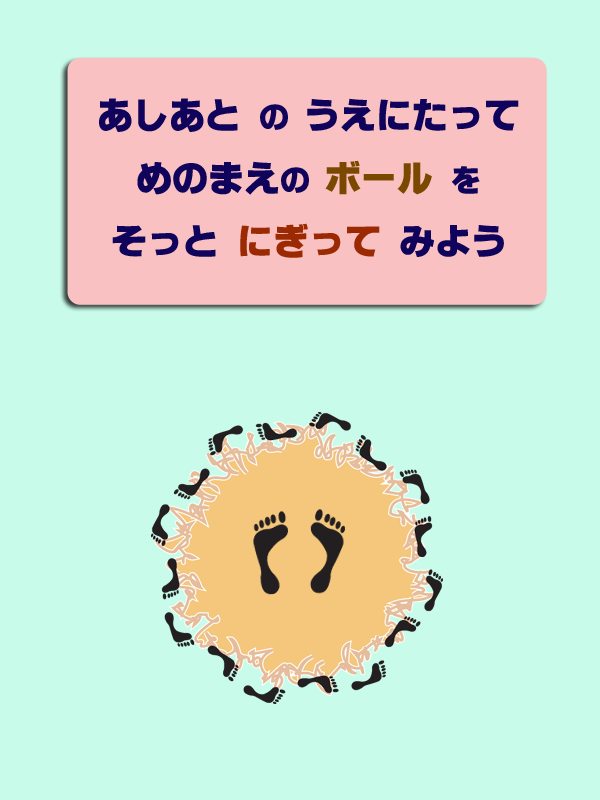
<style>
.page{position:relative;width:600px;height:800px;background:#c8fbea}
.page>*{position:absolute;margin:0}
.t1{font:36px "ÓÝSVbN";color:#0f035b}
.t2{font:30px "ÓÝSVbN";color:#0f035b}
.t3{font:36px "ÓÝSVbN";color:#7b4800}
.t4{font:36px "ÓÝSVbN";color:#9b2a03}
</style>
<div class="page">
<p class="t1" style="left:99px;top:98px;width:420px;height:160px;text-align:center">あしあと <span class="t2">の </span>うえにたって<br>めのまえ<span class="t2">の </span><span class="t3">ボール </span><span class="t2">を<br></span>そっと <span class="t4">にぎって</span> みよう</p>
</div>
